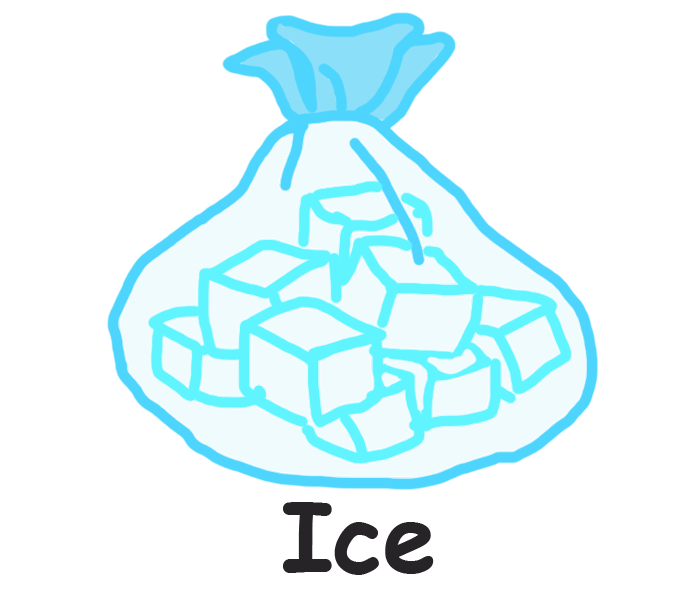
<style>
.page{position:relative;width:690px;height:590px;background:#ffffff}
.page>*{position:absolute;margin:0}
.t1{font:96px "ComicSansMS-Bold";color:#262426}
</style>
<div class="page">
<p class="t1" style="left:283px;top:502px;width:151px;height:73px">Ice</p>
</div>
